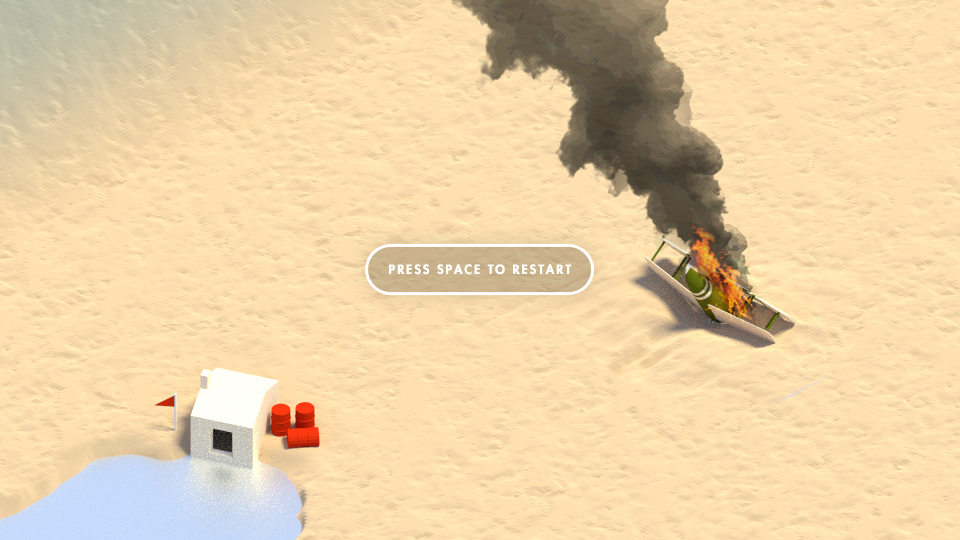
<style>
.page{position:relative;width:960px;height:540px}
.page>*{position:absolute;margin:0}
.t1{font:12.3px "Futura-Heavy";letter-spacing:0.14em;color:#ffffff;text-transform:uppercase;font-weight:bold}
</style>
<div class="page">
<p class="t1" style="left:389px;top:264px;width:183px;height:11px">Press SpACE TO Restart</p>
</div>
